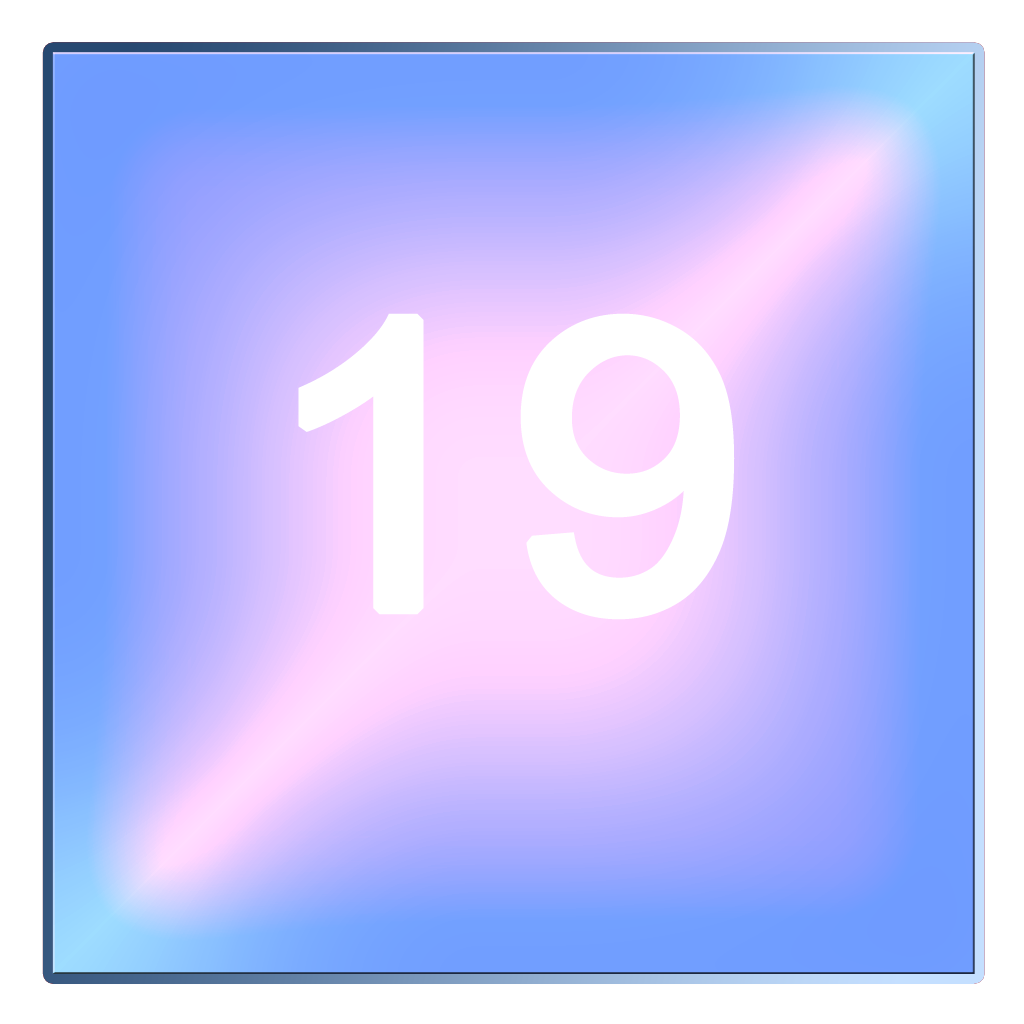
<style>
.page{position:relative;width:1024px;height:1024px;background:#ffffff}
.page>*{position:absolute;margin:0}
.t1{font:400px "ArialNarrow";color:#ffffff;font-weight:bold;scale:1.3 1}
</style>
<div class="page">
<p class="t1" style="left:298px;top:313px;width:437px;height:307px">19</p>
</div>
